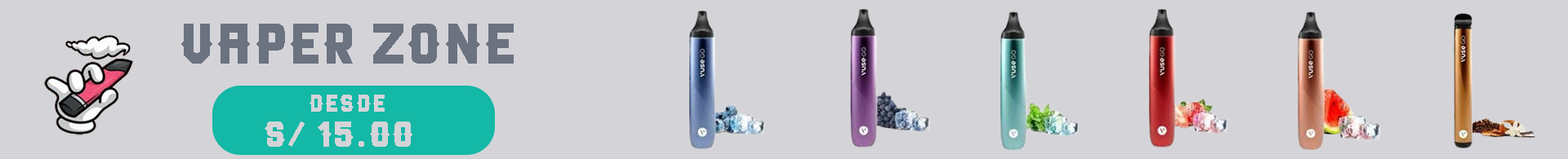
<style>
.page{position:relative;width:1568px;height:159px;background:#d4d4d8}
.page>*{position:absolute;margin:0}
.t1{font:57.2px "DEPALMA";color:#6b7280}
.t2{font:24.5px "DEPALMA";color:#d4d4d8}
.t3{font:36.8px "DEPALMA";color:#d4d4d8}
</style>
<div class="page">
<p class="t1" style="left:181px;top:24px;width:333px;height:40px">VAPER ZONE</p>
<p class="t2" style="left:310px;top:95px;width:75px;height:17px">Desde</p>
<p class="t3" style="left:265px;top:122px;width:147px;height:25px">S/ 15.00</p>
</div>
